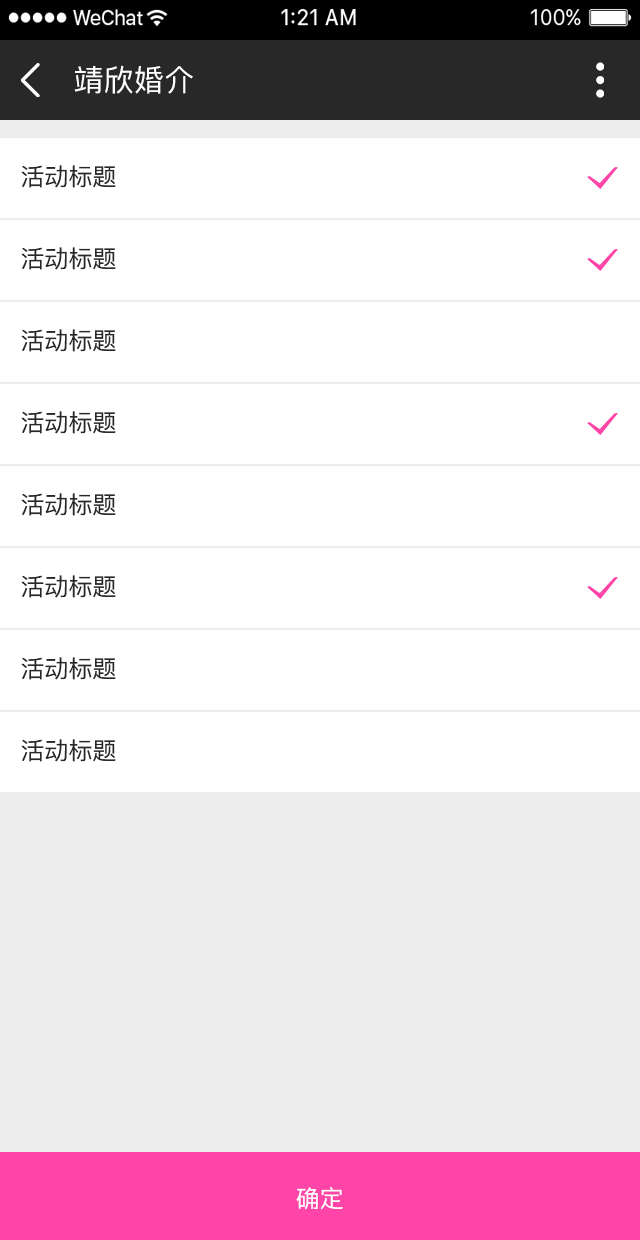
<style>
.page{position:relative;width:640px;height:1240px;background:#ffffff}
.page>*{position:absolute;margin:0}
.t1{font:30px "PingFang-SC-Medium";letter-spacing:0.01em;color:#ffffff;text-transform:uppercase}
.t2{font:24px "PingFang-SC-Medium";color:#282828;text-transform:uppercase}
.t3{font:24px "PingFang-SC-Medium";color:#ffffff;text-transform:uppercase}
</style>
<div class="page">
<p class="t1" style="left:74px;top:65px;width:119px;height:29px">靖欣婚介</p>
<p class="t2" style="left:21px;top:165px;width:95px;height:23px">活动标题</p>
<p class="t2" style="left:21px;top:247px;width:95px;height:23px">活动标题</p>
<p class="t2" style="left:21px;top:329px;width:95px;height:23px">活动标题</p>
<p class="t2" style="left:21px;top:411px;width:95px;height:23px">活动标题</p>
<p class="t2" style="left:21px;top:493px;width:95px;height:23px">活动标题</p>
<p class="t2" style="left:21px;top:575px;width:95px;height:23px">活动标题</p>
<p class="t2" style="left:21px;top:657px;width:95px;height:23px">活动标题</p>
<p class="t2" style="left:21px;top:739px;width:95px;height:23px">活动标题</p>
<p class="t3" style="left:296px;top:1187px;width:47px;height:23px">确定</p>
</div>
